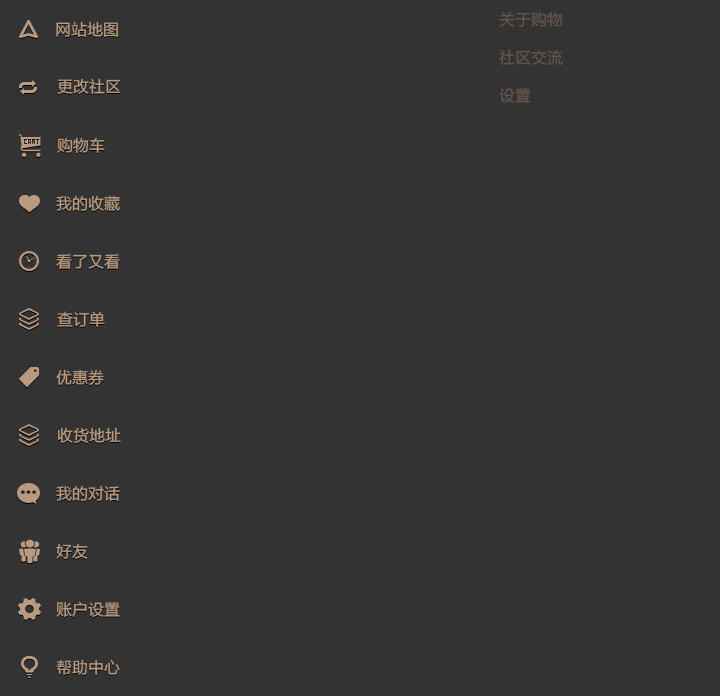
<style>
.page{position:relative;width:720px;height:696px;background:#333333}
.page>*{position:absolute;margin:0}
.t1{font:16px "FZLTHK--GBK1-0";color:#64554c}
.t2{font:16px "FZLTHK--GBK1-0";color:#b79a7f}
</style>
<div class="page">
<p class="t1" style="left:499px;top:11px;width:64px;height:16px">关于购物</p>
<p class="t2" style="left:56px;top:21px;width:62px;height:16px">网站地图</p>
<p class="t1" style="left:499px;top:49px;width:64px;height:16px">社区交流</p>
<p class="t2" style="left:57px;top:78px;width:64px;height:16px">更改社区</p>
<p class="t1" style="left:499px;top:88px;width:32px;height:15px">设置</p>
<p class="t2" style="left:57px;top:137px;width:48px;height:16px">购物车</p>
<p class="t2" style="left:56px;top:195px;width:64px;height:16px">我的收藏</p>
<p class="t2" style="left:56px;top:254px;width:64px;height:15px">看了又看</p>
<p class="t2" style="left:57px;top:311px;width:48px;height:16px">查订单</p>
<p class="t2" style="left:56px;top:369px;width:48px;height:16px">优惠券</p>
<p class="t2" style="left:57px;top:427px;width:64px;height:17px">收货地址</p>
<p class="t2" style="left:56px;top:485px;width:64px;height:16px">我的对话</p>
<p class="t2" style="left:56px;top:543px;width:32px;height:16px">好友</p>
<p class="t2" style="left:56px;top:601px;width:64px;height:16px">账户设置</p>
<p class="t2" style="left:56px;top:659px;width:64px;height:16px">帮助中心</p>
</div>
